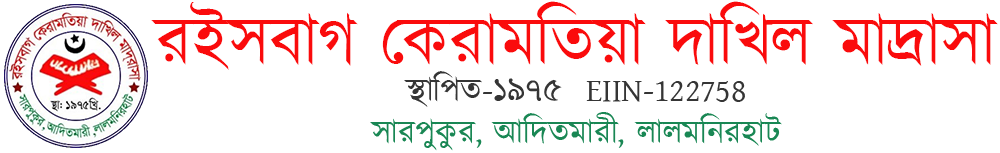
<style>
.page{position:relative;width:1000px;height:153px;background:#ffffff}
.page>*{position:absolute;margin:0}
.t1{font:68.5px "Kalpurush";color:#fa0b0c}
.t2{font:32.9px "Kalpurush";color:#353535}
.t3{font:32.9px "Kalpurush";color:#198754}
</style>
<div class="page">
<p class="t1" style="left:151px;top:1px;width:847px;height:69px">রইসবাগ কেরামতিয়া দাখিল মাদ্রাসা</p>
<p class="t2" style="left:404px;top:71px;width:341px;height:36px">স্থাপিত-১৯৭৫  EIIN-122758</p>
<p class="t3" style="left:370px;top:112px;width:412px;height:39px">সারপুকুর, আদিতমারী, লালমনিরহাট</p>
</div>
